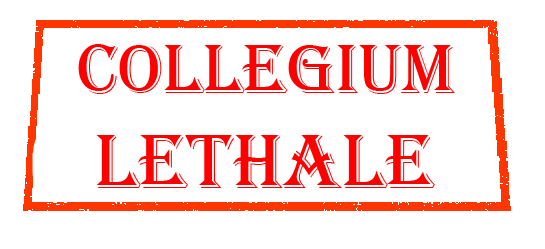
<style>
.page{position:relative;width:545px;height:249px;background:#ffffff}
.page>*{position:absolute;margin:0}
.t1{font:72px "Algerian";color:#ff0000}
.t2{font:79px "Algerian";color:#ff0000}
</style>
<div class="page">
<p class="t1" style="left:78px;top:44px;width:377px;height:144px">COLLEGIUM<br> <span class="t2">LETHALE</span></p>
</div>
